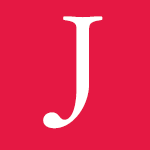
<style>
.page{position:relative;width:150px;height:150px;background:#e51843}
.page>*{position:absolute;margin:0}
.t1{font:120px "HoeflerText-Roman";color:#ffffff}
</style>
<div class="page">
<p class="t1" style="left:43px;top:16px;width:60px;height:113px">J</p>
</div>
